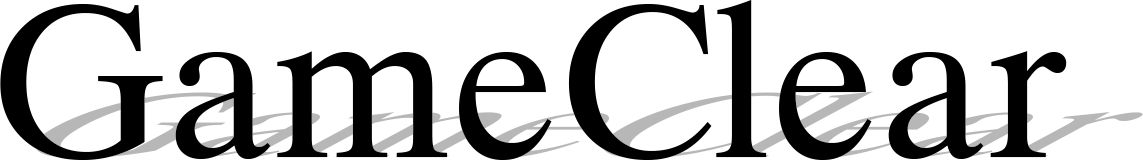
<style>
.page{position:relative;width:1143px;height:160px;background:#ffffff}
.page>*{position:absolute;margin:0}
.t1{font:217.3px "Dutch801BT-Roman";color:#000000}
</style>
<div class="page">
<p class="t1" style="left:0px;top:0px;width:1067px;height:160px">GameClear</p>
</div>
